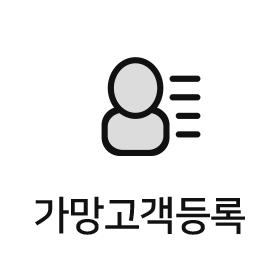
<style>
.page{position:relative;width:280px;height:280px;background:#ffffff}
.page>*{position:absolute;margin:0}
.t1{font:40px "NanumSquareB";letter-spacing:-0.025em;color:#111111;text-transform:uppercase}
</style>
<div class="page">
<p class="t1" style="left:35px;top:196px;width:210px;height:39px">가망고객등록</p>
</div>
